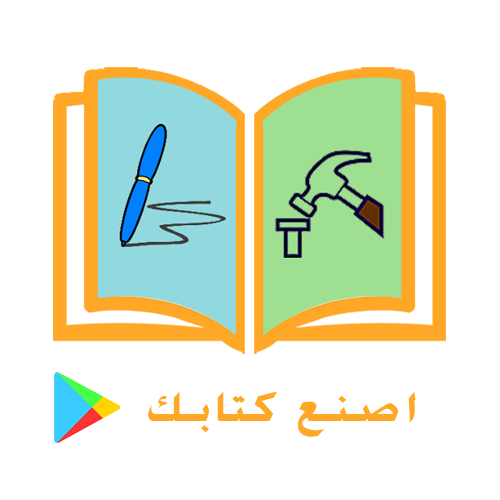
<style>
.page{position:relative;width:500px;height:500px;background:#ffffff}
.page>*{position:absolute;margin:0}
.t1{font:43px "AdvertisingBold";letter-spacing:0.1em;color:#ffa726}
</style>
<div class="page">
<p class="t1" style="left:148px;top:391px;width:268px;height:46px">اصنع كتابك</p>
</div>
